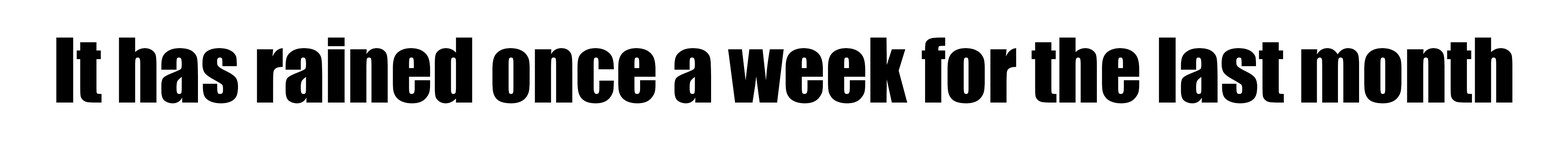
<style>
.page{position:relative;width:1568px;height:155px;background:#ffffff}
.page>*{position:absolute;margin:0}
.t1{font:82.3px "Impact";color:#000000}
</style>
<div class="page">
<p class="t1" style="left:56px;top:37px;width:1457px;height:66px">It has rained once a week for the last month</p>
</div>
